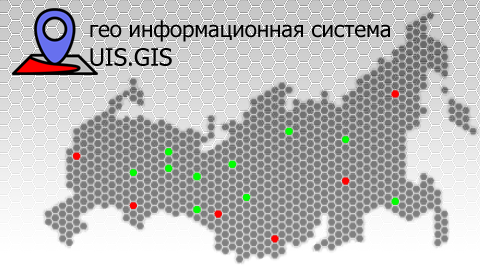
<style>
.page{position:relative;width:480px;height:276px}
.page>*{position:absolute;margin:0}
.t1{font:22px "Tahoma";color:#000000}
.t2{font:24px "Tahoma";color:#000000}
</style>
<div class="page">
<p class="t1" style="left:90px;top:20px;width:300px;height:46px">гео информационная система<br><span class="t2">UIS.GIS</span></p>
</div>
